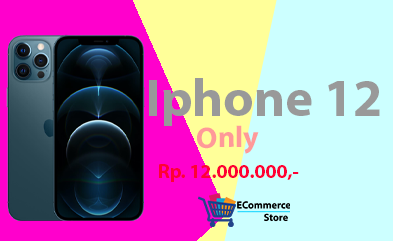
<style>
.page{position:relative;width:393px;height:241px;background:#ccffff}
.page>*{position:absolute;margin:0}
.t1{font:53px "MyriadPro-Bold";color:#999999}
.t2{font:29.8px "MyriadPro-Bold";color:#ff9999}
.t3{font:19.7px "MyriadPro-Bold";color:#ff0033}
</style>
<div class="page">
<p class="t1" style="left:149px;top:78px;width:231px;height:48px">Iphone 12</p>
<p class="t2" style="left:197px;top:125px;width:62px;height:29px;rotate:-1deg">Only</p>
<p class="t3" style="left:159px;top:164px;width:140px;height:18px">Rp. 12.000.000,-</p>
</div>
